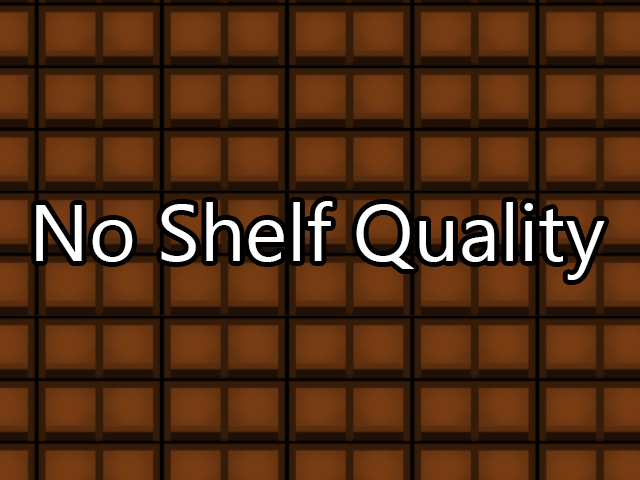
<style>
.page{position:relative;width:640px;height:480px}
.page>*{position:absolute;margin:0}
.t1{font:80px "SegoeUISymbol";color:#ffffff}
</style>
<div class="page">
<p class="t1" style="left:36px;top:201px;width:569px;height:79px">No Shelf Quality</p>
</div>
